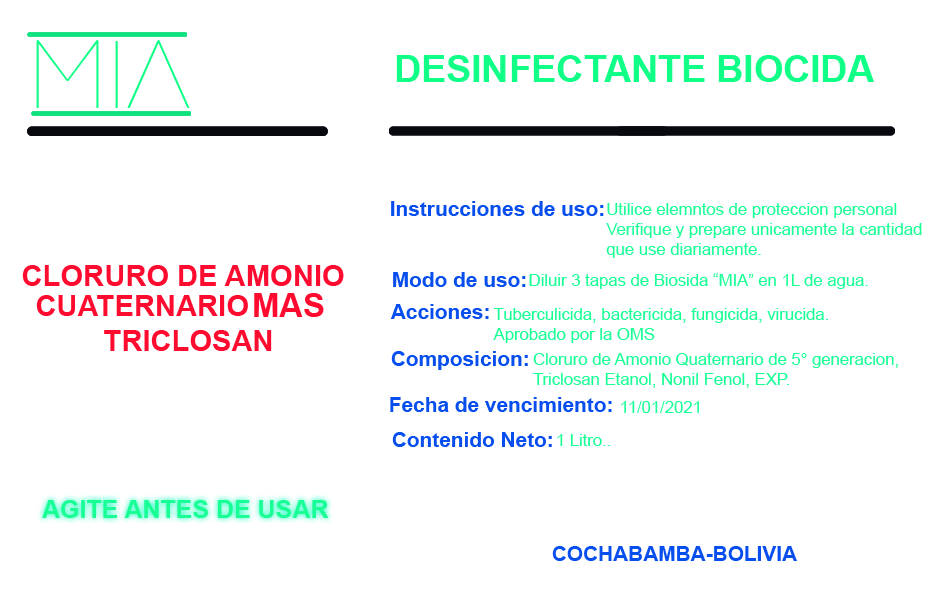
<style>
.page{position:relative;width:945px;height:591px;background:#ffffff}
.page>*{position:absolute;margin:0}
.t1{font:95.8px "Posterama2001W04-Thin";color:#0fff87}
.t2{font:37.5px "Arial-BoldMT";color:#0fff87}
.t3{font:20.8px "Arial-BoldMT";color:#074eee}
.t4{font:16.7px "ArialMT";color:#17ff95}
.t5{font:29.2px "Arial-BoldMT";color:#ff0b2f}
.t6{font:33.3px "Arial-BoldMT";color:#ff0b2f}
.t7{font:25px "Arial-BoldMT";color:#17ff95}
</style>
<div class="page">
<p class="t1" style="left:36px;top:40px;width:154px;height:68px">MIA</p>
<p class="t2" style="left:396px;top:55px;width:478px;height:27px">DESINFECTANTE BIOCIDA</p>
<p class="t3" style="left:391px;top:201px;width:213px;height:15px">Instrucciones de uso:</p>
<p class="t4" style="left:606px;top:203px;width:316px;height:55px">Utilice elemntos de proteccion personal<br>Verifique y prepare unicamente la cantidad<br>que use diariamente.</p>
<p class="t5" style="left:22px;top:265px;width:322px;height:21px">CLORURO DE AMONIO</p>
<p class="t3" style="left:393px;top:272px;width:133px;height:15px">Modo de uso:</p>
<p class="t4" style="left:529px;top:273px;width:339px;height:16px">Diluir 3 tapas de Biosida “MIA” en 1L de agua.</p>
<p class="t6" style="left:254px;top:293px;width:70px;height:24px">MAS</p>
<p class="t5" style="left:36px;top:295px;width:212px;height:21px">CUATERNARIO</p>
<p class="t3" style="left:390px;top:304px;width:99px;height:15px">Acciones:</p>
<p class="t4" style="left:493px;top:308px;width:336px;height:35px">Tuberculicida, bactericida, fungicida, virucida.<br>Aprobado por la OMS</p>
<p class="t5" style="left:104px;top:330px;width:168px;height:21px">TRICLOSAN</p>
<p class="t3" style="left:391px;top:351px;width:137px;height:19px">Composicion:</p>
<p class="t4" style="left:533px;top:353px;width:365px;height:35px">Cloruro de Amonio Quaternario de 5° generacion,<br>Triclosan Etanol, Nonil Fenol, EXP.</p>
<p class="t3" style="left:390px;top:397px;width:222px;height:15px">Fecha de vencimiento:</p>
<p class="t4" style="left:621px;top:401px;width:78px;height:12px">11/01/2021</p>
<p class="t3" style="left:392px;top:432px;width:160px;height:15px">Contenido Neto:</p>
<p class="t4" style="left:557px;top:434px;width:54px;height:12px">1 Litro..</p>
<p class="t7" style="left:42px;top:500px;width:287px;height:18px">AGITE ANTES DE USAR</p>
<p class="t3" style="left:552px;top:546px;width:245px;height:15px">COCHABAMBA-BOLIVIA</p>
</div>
